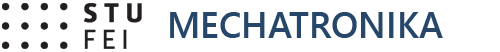
<style>
.page{position:relative;width:500px;height:52px;background:#ffffff}
.page>*{position:absolute;margin:0}
.t1{font:36px "SegoeUI-Semibold";color:#26476a}
</style>
<div class="page">
<p class="t1" style="left:170px;top:12px;width:273px;height:26px">MECHATRONIKA</p>
</div>
